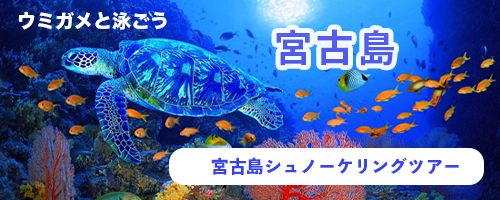
<style>
.page{position:relative;width:500px;height:200px}
.page>*{position:absolute;margin:0}
.t1{font:19px "HiraKakuStdN-W8";color:#ffffff}
.t2{font:38px "SourceHanSansJP-Bold";letter-spacing:0.1em;color:#515cee}
.t3{font:17.9px "ToppanBunkyuMidashiGothicStdN-ExtraBold";color:#3643ef}
</style>
<div class="page">
<p class="t1" style="left:19px;top:11px;width:148px;height:19px">ウミガメと泳ごう</p>
<p class="t2" style="left:276px;top:29px;width:118px;height:37px">宮古島</p>
<p class="t3" style="left:211px;top:157px;width:248px;height:18px">宮古島シュノーケリングツアー</p>
</div>
